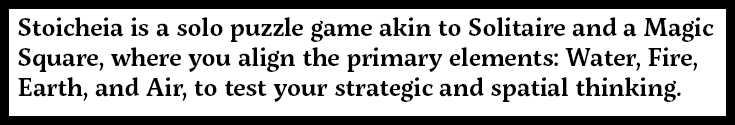
<style>
.page{position:relative;width:735px;height:125px;background:#ffffff}
.page>*{position:absolute;margin:0}
.t1{font:25px "ServusSlab-SemiBold";color:#020202}
</style>
<div class="page">
<p class="t1" style="left:18px;top:17px;width:696px;height:85px">Stoicheia is a solo puzzle game akin to Solitaire and a Magic Square, where you align the primary elements: Water, Fire, <br>Earth, and Air, to test your strategic and spatial thinking.</p>
</div>
